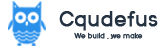
<style>
.page{position:relative;width:158px;height:49px;background:#ffffff}
.page>*{position:absolute;margin:0}
.t1{font:21.2px "Grotte-Regular";letter-spacing:-0.03em;color:#233141;font-weight:bold;scale:1.09 1}
.t2{font:7.3px "Grotte-Regular";letter-spacing:-0.03em;color:#233141;font-weight:bold;scale:1.09 1}
</style>
<div class="page">
<p class="t1" style="left:59px;top:11px;width:99px;height:20px">Cqudefus</p>
<p class="t2" style="left:74px;top:32px;width:69px;height:7px">We build , ,we make</p>
</div>
